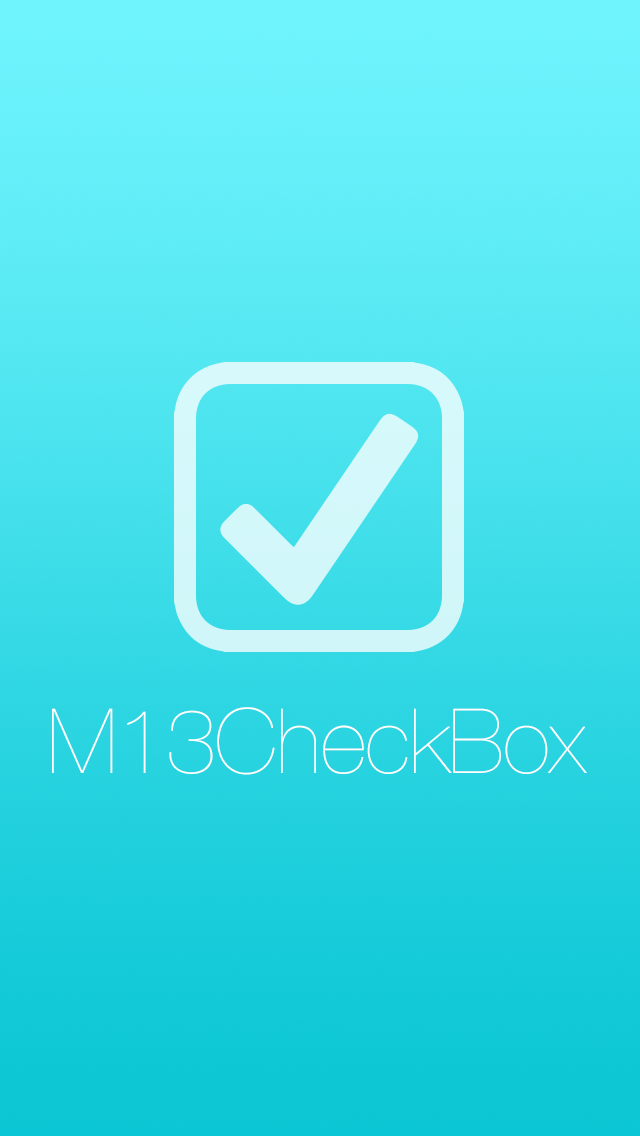
<style>
.page{position:relative;width:640px;height:1136px}
.page>*{position:absolute;margin:0}
.t1{font:90px "HelveticaNeue-UltraLight";letter-spacing:-0.007em;color:#ffffff}
</style>
<div class="page">
<p class="t1" style="left:52px;top:707px;width:535px;height:68px">M13CheckBox</p>
</div>
